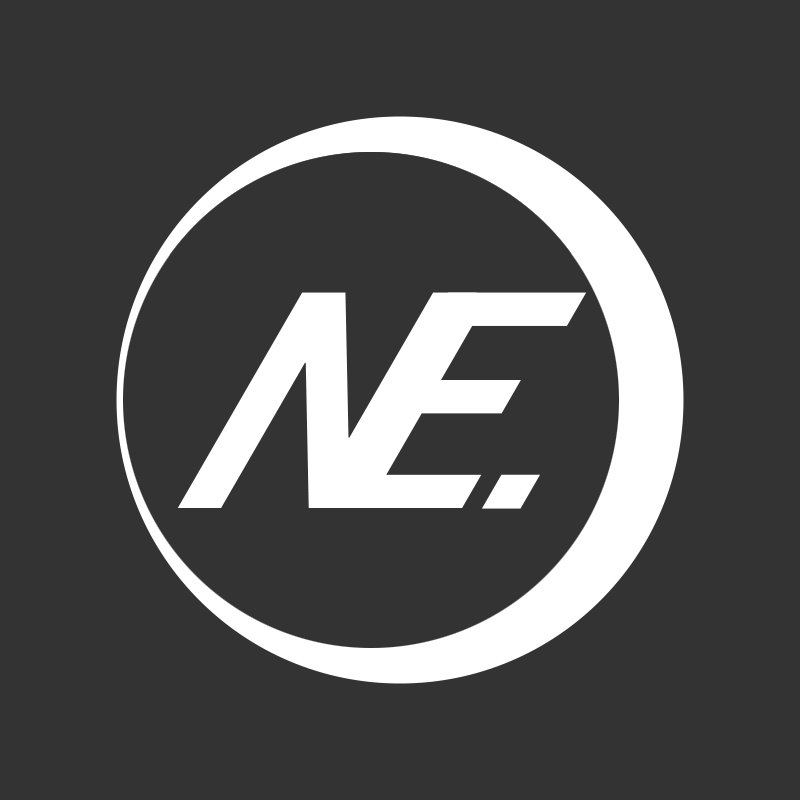
<style>
.page{position:relative;width:800px;height:800px;background:#333333}
.page>*{position:absolute;margin:0}
.t1{font:350px "Roboto-Bold";color:#ffffff;scale:0.87 1}
.t2{font:311.4px "Roboto-Bold";color:#ffffff;scale:0.87 1}
</style>
<div class="page">
<p class="t1" style="left:177px;top:292px;width:300px;height:216px">N</p>
<p class="t1" style="left:323px;top:292px;width:264px;height:216px">E</p>
<p class="t2" style="left:481px;top:474px;width:59px;height:35px">.</p>
</div>
